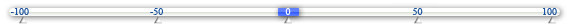
<style>
.page{position:relative;width:567px;height:25px;background:#ffffff}
.page>*{position:absolute;margin:0}
.t1{font:10px "TimesNewRomanPSMT";color:#18519e}
.t2{font:10px "TimesNewRomanPSMT";color:#ffffff}
</style>
<div class="page">
<p class="t1" style="left:11px;top:8px;width:18px;height:7px">-100</p>
<p class="t1" style="left:150px;top:8px;width:13px;height:7px">-50</p>
<p class="t2" style="left:285px;top:8px;width:6px;height:7px">0</p>
<p class="t1" style="left:412px;top:8px;width:11px;height:7px">50</p>
<p class="t1" style="left:543px;top:8px;width:14px;height:7px">100</p>
</div>
